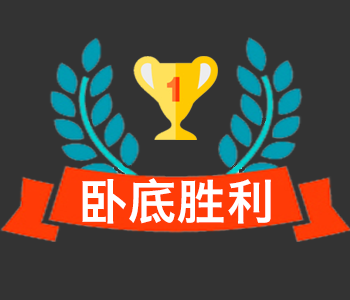
<style>
.page{position:relative;width:350px;height:300px;background:#333333}
.page>*{position:absolute;margin:0}
.t1{font:48.1px "HiraginoSansGB-W6";letter-spacing:0.025em;color:#ffffff}
</style>
<div class="page">
<p class="t1" style="left:82px;top:178px;width:189px;height:46px">卧底胜利</p>
</div>
